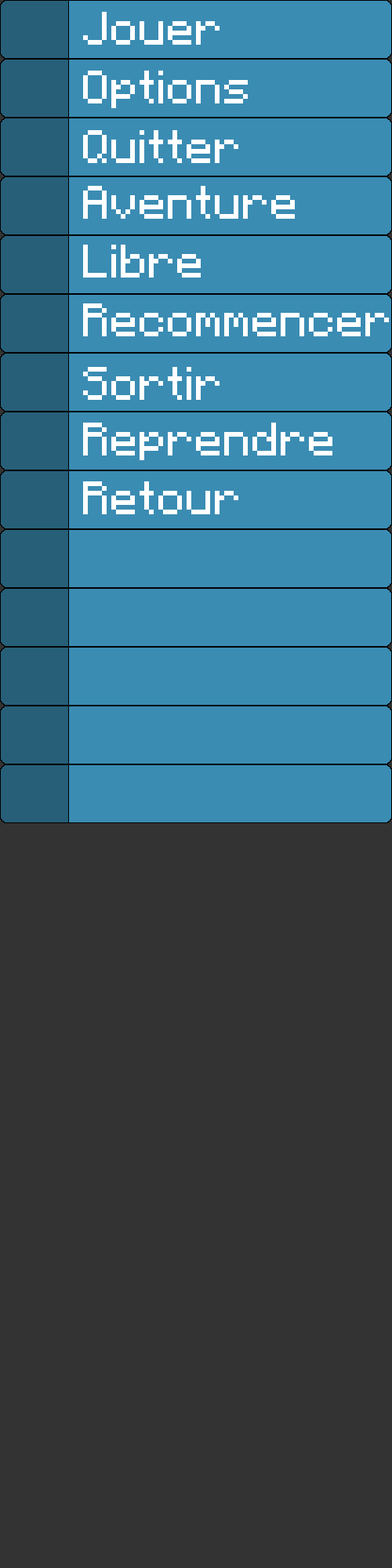
<style>
.page{position:relative;width:392px;height:1568px;background:#333333}
.page>*{position:absolute;margin:0}
.t1{font:37.6px "Minecraftia";color:#ffffff}
</style>
<div class="page">
<p class="t1" style="left:83px;top:12px;width:137px;height:33px">Jouer</p>
<p class="t1" style="left:83px;top:71px;width:165px;height:37px">Options</p>
<p class="t1" style="left:83px;top:130px;width:155px;height:33px">Quitter</p>
<p class="t1" style="left:83px;top:186px;width:212px;height:33px">Aventure</p>
<p class="t1" style="left:83px;top:245px;width:118px;height:33px">Libre</p>
<p class="t1" style="left:83px;top:303px;width:306px;height:33px">Recommencer</p>
<p class="t1" style="left:83px;top:367px;width:137px;height:33px">Sortir</p>
<p class="t1" style="left:83px;top:423px;width:249px;height:37px">Reprendre</p>
<p class="t1" style="left:83px;top:481px;width:155px;height:33px">Retour</p>
</div>
